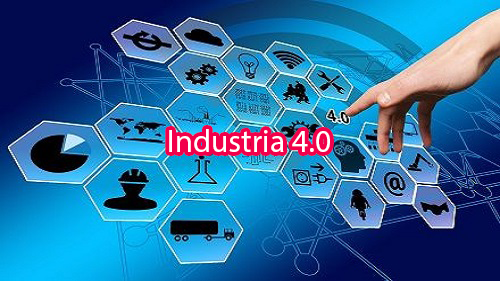
<style>
.page{position:relative;width:500px;height:281px}
.page>*{position:absolute;margin:0}
.t1{font:32px "MyriadPro-Regular";color:#ffffff}
</style>
<div class="page">
<p class="t1" style="left:169px;top:129px;width:161px;height:23px">Industria 4.0</p>
</div>
